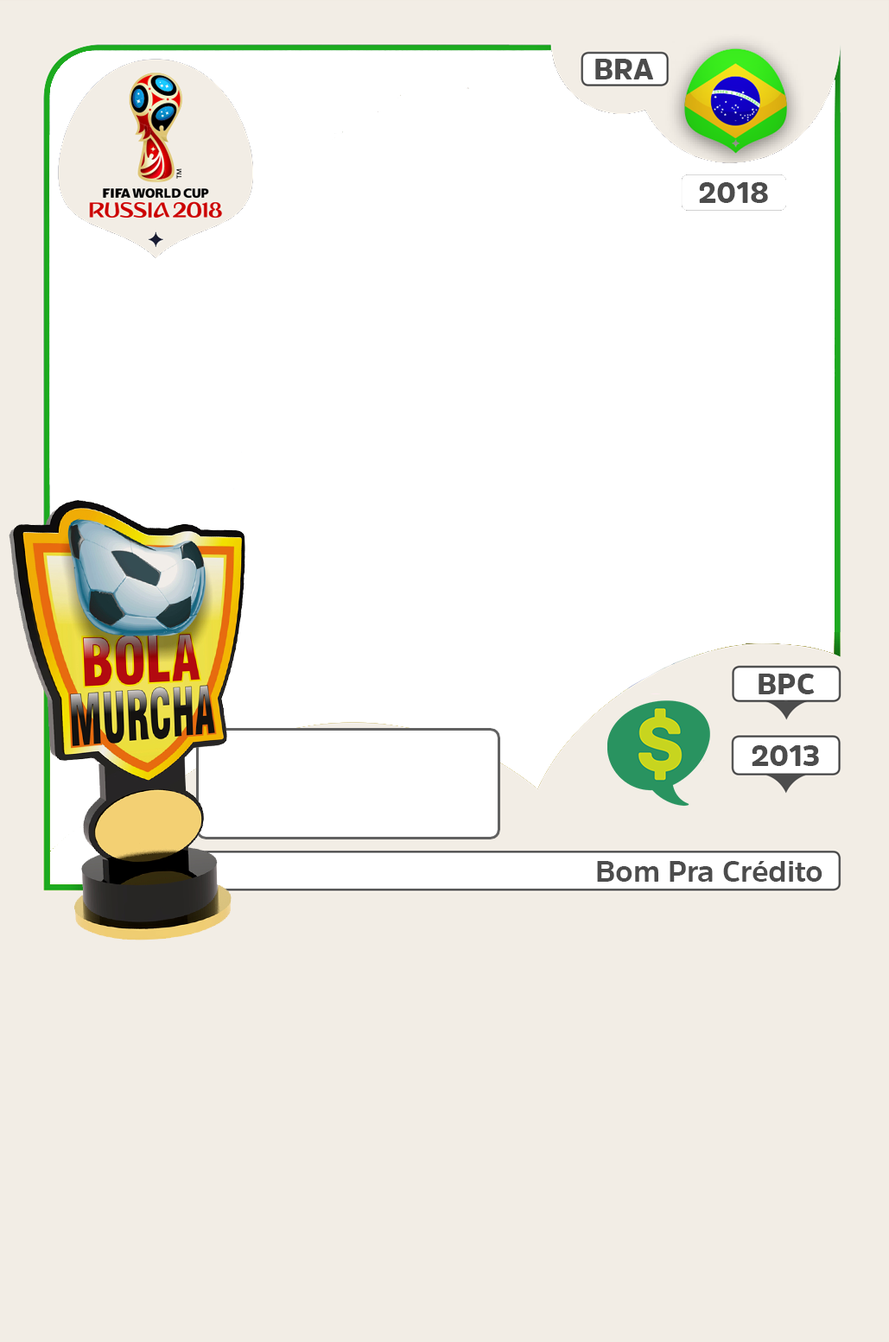
<style>
.page{position:relative;width:889px;height:1342px;background:#f2ede5}
.page>*{position:absolute;margin:0}
.t1{font:29.4px "AmsiPro-Black";letter-spacing:-0.01em;color:#4c4c4c}
.t2{font:29.4px "AmsiPro-Bold";letter-spacing:-0.01em;color:#4c4c4c}
</style>
<div class="page">
<p class="t1" style="left:595px;top:59px;width:58px;height:20px">BRA</p>
<p class="t1" style="left:699px;top:182px;width:69px;height:21px">2018</p>
<p class="t1" style="left:758px;top:674px;width:56px;height:20px">BPC</p>
<p class="t1" style="left:751px;top:745px;width:68px;height:21px">2013</p>
<p class="t2" style="left:597px;top:861px;width:225px;height:21px">Bom Pra Crédito</p>
</div>
